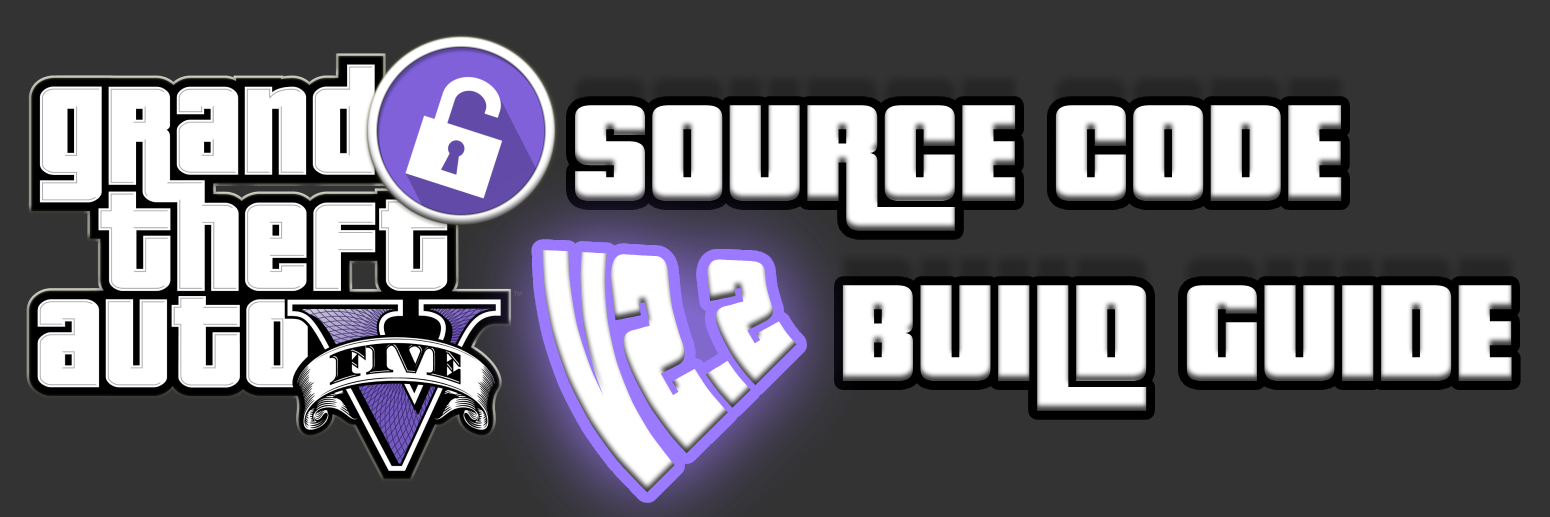
<style>
.page{position:relative;width:1550px;height:517px;background:#333333}
.page>*{position:absolute;margin:0}
.t1{font:150px "PricedownBl-Regular";color:#ffffff}
.t2{font:124.4px "PricedownBl-Regular";color:#ffffff}
</style>
<div class="page">
<p class="t1" style="left:575px;top:105px;width:937px;height:306px">SOURCE CODE <br>        BUILD GUIDE</p>
<p class="t2" style="left:542px;top:250px;width:255px;height:243px">V2.2</p>
</div>
